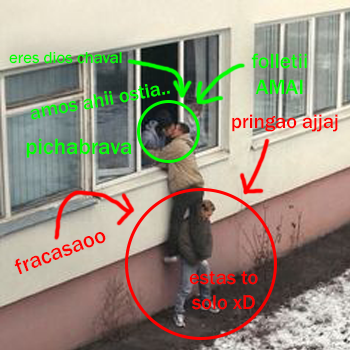
<style>
.page{position:relative;width:350px;height:350px}
.page>*{position:absolute;margin:0}
.t1{font:16.6px "FranklinGothic-Medium";color:#00ff00}
.t2{font:21.3px "FranklinGothic-Medium";color:#00ff00}
.t3{font:20.3px "FranklinGothic-Medium";color:#00ff00}
.t4{font:20.3px "FranklinGothic-Medium";color:#ff0000}
.t5{font:22.8px "FranklinGothic-Medium";color:#00ff00}
.t6{font:22.5px "FranklinGothic-Medium";color:#ff0000}
.t7{font:20.5px "FranklinGothic-Medium";color:#ff0000}
</style>
<div class="page">
<p class="t1" style="left:9px;top:52px;width:113px;height:12px">eres dios chaval</p>
<p class="t2" style="left:251px;top:53px;width:56px;height:41px;text-align:center">folletii<br>AMAI</p>
<p class="t3" style="left:30px;top:84px;width:140px;height:36px;rotate:-11deg">amos ahii ostia..</p>
<p class="t4" style="left:232px;top:114px;width:106px;height:18px">pringao ajjaj</p>
<p class="t5" style="left:26px;top:138px;width:106px;height:20px">pichabrava</p>
<p class="t6" style="left:14px;top:232px;width:92px;height:43px;rotate:-21deg">fracasaoo</p>
<p class="t7" style="left:189px;top:271px;width:69px;height:39px;text-align:center">estas to<br>solo xD</p>
</div>
